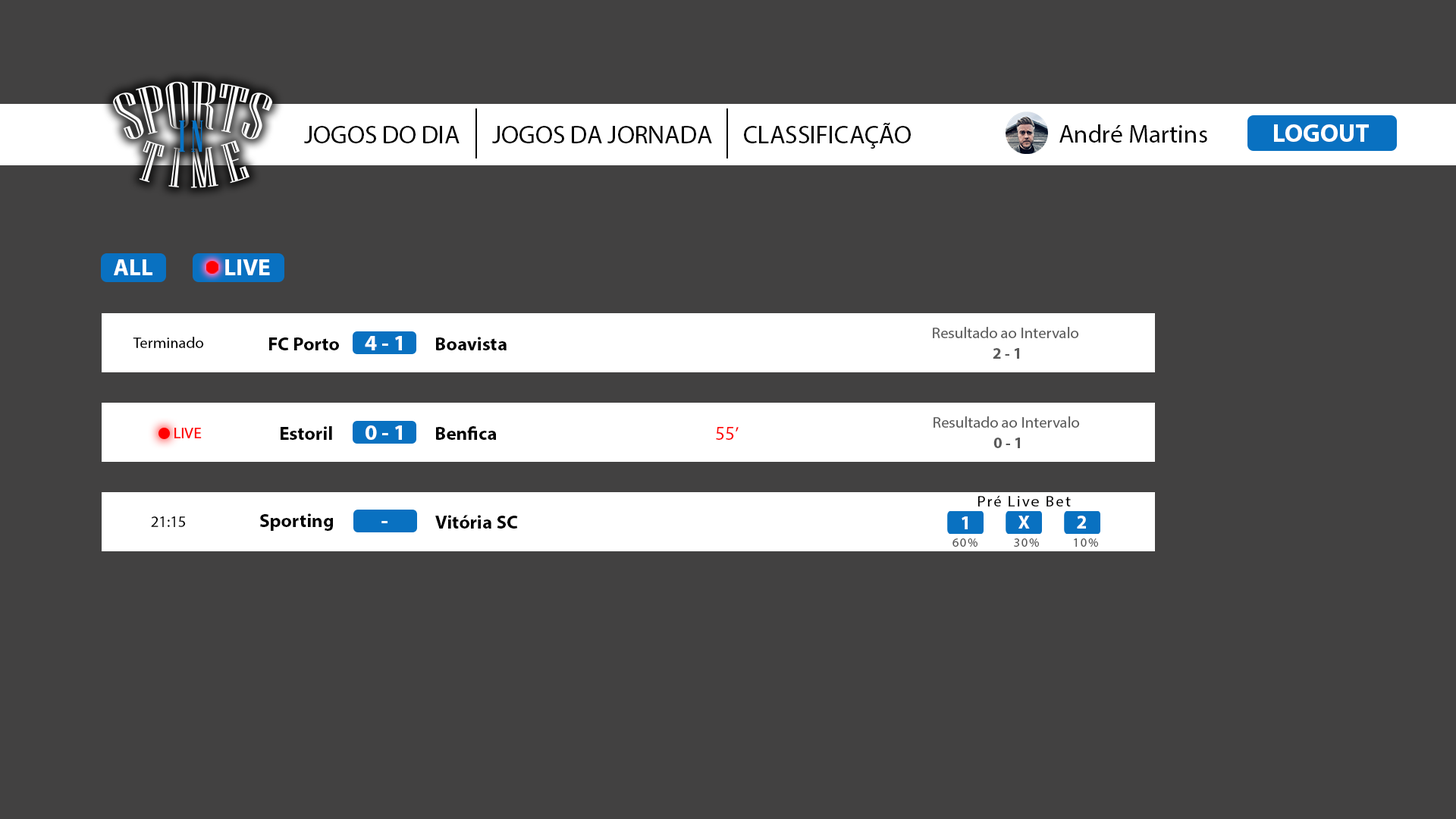
<style>
.page{position:relative;width:1456px;height:819px;background:#424141}
.page>*{position:absolute;margin:0}
.t1{font:25.3px "MyriadPro-Regular";color:#000000}
.t2{font:15.8px "MyriadPro-Regular";color:#5a5a5a}
.t3{font:15.8px "MyriadPro-Regular";color:#000000}
.t4{font:19px "MyriadPro-Bold";color:#000000}
.t5{font:22.1px "MyriadPro-Bold";color:#ffffff}
.t6{font:15.8px "MyriadPro-Bold";color:#5a5a5a}
.t7{font:19px "MyriadPro-Regular";color:#ff0000}
.t8{font:15.8px "MyriadPro-Regular";letter-spacing:0.1em;color:#000000}
.t9{font:19px "MyriadPro-Bold";color:#ffffff}
.t10{font:12.6px "MyriadPro-Regular";letter-spacing:0.1em;color:#5a5a5a}
</style>
<div class="page">
<p class="t1" style="left:304px;top:126px;width:156px;height:17px">JOGOS DO DIA</p>
<p class="t1" style="left:492px;top:126px;width:220px;height:17px">JOGOS DA JORNADA</p>
<p class="t1" style="left:744px;top:122px;width:167px;height:27px">CLASSIFICAÇÃO</p>
<p class="t1" style="left:1059px;top:124px;width:148px;height:19px">André Martins</p>
<p class="t2" style="left:933px;top:327px;width:146px;height:11px">Resultado ao Intervalo</p>
<p class="t3" style="left:133px;top:337px;width:71px;height:11px">Terminado</p>
<p class="t4" style="left:269px;top:337px;width:70px;height:13px">FC Porto</p>
<p class="t5" style="left:365px;top:336px;width:37px;height:14px">4 - 1</p>
<p class="t4" style="left:436px;top:337px;width:71px;height:13px">Boavista</p>
<p class="t6" style="left:993px;top:348px;width:26px;height:11px">2 - 1</p>
<p class="t5" style="left:366px;top:425px;width:36px;height:15px">0 - 1</p>
<p class="t2" style="left:933px;top:416px;width:147px;height:12px">Resultado ao Intervalo</p>
<p class="t4" style="left:281px;top:426px;width:51px;height:14px">Estoril</p>
<p class="t4" style="left:436px;top:426px;width:61px;height:14px">Benfica</p>
<p class="t7" style="left:716px;top:427px;width:23px;height:13px">55’</p>
<p class="t6" style="left:993px;top:438px;width:27px;height:10px">0 - 1</p>
<p class="t8" style="left:977px;top:495px;width:94px;height:12px">Pré Live Bet</p>
<p class="t3" style="left:151px;top:516px;width:35px;height:11px">21:15</p>
<p class="t4" style="left:260px;top:513px;width:73px;height:18px">Sporting</p>
<p class="t5" style="left:381px;top:521px;width:7px;height:2px">-</p>
<p class="t4" style="left:435px;top:515px;width:83px;height:14px">Vitória SC</p>
<p class="t9" style="left:962px;top:516px;width:6px;height:13px">1</p>
<p class="t9" style="left:1018px;top:516px;width:12px;height:13px">X</p>
<p class="t9" style="left:1077px;top:516px;width:9px;height:13px">2</p>
<p class="t10" style="left:952px;top:538px;width:25px;height:9px">60%</p>
<p class="t10" style="left:1014px;top:538px;width:25px;height:9px">30%</p>
<p class="t10" style="left:1074px;top:538px;width:24px;height:9px">10%</p>
</div>
